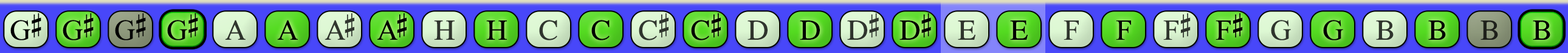
<style>
.page{position:relative;width:1568px;height:53px}
.page>*{position:absolute;margin:0}
.t1{font:29.2px "OpusChords";letter-spacing:-0.025em;color:#000000}
.t2{font:29.2px "OpusChords";letter-spacing:-0.1em;color:#2f352d}
.t3{font:29.2px "OpusChords";letter-spacing:-0.1em;color:#000000}
.t4{font:29.2px "OpusChords";color:#2f352d}
.t5{font:29.2px "OpusChords";color:#000000}
.t6{font:29.2px "OpusChords";letter-spacing:-0.025em;color:#2f352d}
.t7{font:29.2px "OpusChords";color:#30352d}
.t8{font:29.2px "OpusChords";color:#30362e}
.t9{font:29.2px "OpusChords";color:#1f211b}
</style>
<div class="page">
<p class="t1" style="left:10px;top:13px;width:31px;height:28px">G#</p>
<p class="t1" style="left:63px;top:13px;width:31px;height:28px">G#</p>
<p class="t1" style="left:115px;top:13px;width:31px;height:28px">G#</p>
<p class="t1" style="left:167px;top:13px;width:31px;height:28px">G#</p>
<p class="t2" style="left:325px;top:13px;width:29px;height:27px">A#</p>
<p class="t3" style="left:377px;top:13px;width:30px;height:27px">A#</p>
<p class="t4" style="left:639px;top:13px;width:30px;height:28px">C#</p>
<p class="t5" style="left:691px;top:13px;width:30px;height:28px">C#</p>
<p class="t6" style="left:847px;top:13px;width:32px;height:27px">D#</p>
<p class="t1" style="left:899px;top:13px;width:32px;height:27px">D#</p>
<p class="t7" style="left:1163px;top:13px;width:28px;height:27px">F#</p>
<p class="t5" style="left:1216px;top:13px;width:27px;height:27px">F#</p>
<p class="t4" style="left:225px;top:20px;width:21px;height:20px">A</p>
<p class="t5" style="left:277px;top:20px;width:21px;height:20px">A</p>
<p class="t7" style="left:434px;top:21px;width:21px;height:19px">H</p>
<p class="t5" style="left:486px;top:21px;width:21px;height:19px">H</p>
<p class="t8" style="left:539px;top:20px;width:18px;height:21px">C</p>
<p class="t5" style="left:591px;top:20px;width:19px;height:21px">C</p>
<p class="t4" style="left:748px;top:21px;width:20px;height:19px">D</p>
<p class="t5" style="left:800px;top:21px;width:20px;height:19px">D</p>
<p class="t8" style="left:958px;top:21px;width:17px;height:19px">E</p>
<p class="t5" style="left:1010px;top:21px;width:18px;height:19px">E</p>
<p class="t8" style="left:1064px;top:21px;width:15px;height:19px">F</p>
<p class="t5" style="left:1116px;top:21px;width:15px;height:19px">F</p>
<p class="t4" style="left:1271px;top:20px;width:20px;height:21px">G</p>
<p class="t5" style="left:1323px;top:20px;width:20px;height:21px">G</p>
<p class="t7" style="left:1376px;top:21px;width:18px;height:19px">B</p>
<p class="t5" style="left:1428px;top:21px;width:18px;height:19px">B</p>
<p class="t9" style="left:1480px;top:21px;width:18px;height:19px">B</p>
<p class="t5" style="left:1533px;top:21px;width:17px;height:19px">B</p>
</div>
